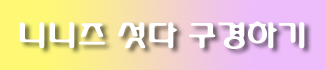
<style>
.page{position:relative;width:325px;height:70px}
.page>*{position:absolute;margin:0}
.t1{font:30px "HYdnkB";color:#fefefe}
</style>
<div class="page">
<p class="t1" style="left:19px;top:21px;width:286px;height:28px">니니즈 섯다 구경하기</p>
</div>
